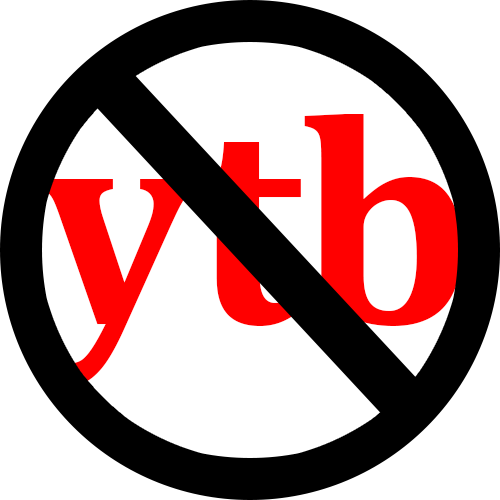
<style>
.page{position:relative;width:500px;height:500px;background:#ffffff}
.page>*{position:absolute;margin:0}
.t1{font:300px "Cambria-Bold";letter-spacing:-0.01em;color:#ff0000}
</style>
<div class="page">
<p class="t1" style="left:39px;top:114px;width:423px;height:273px">ytb</p>
</div>
